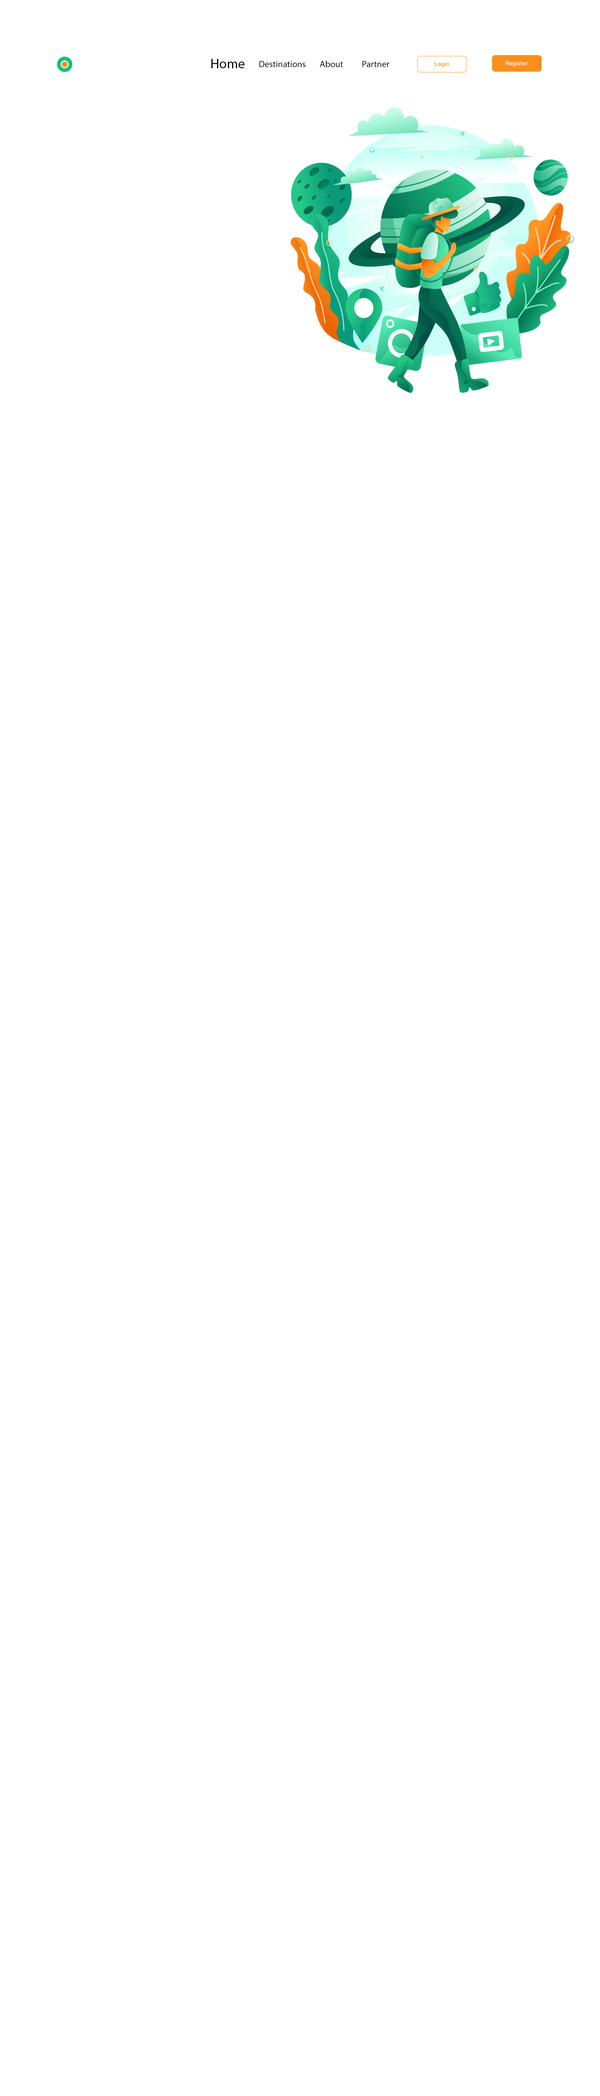
<style>
.page{position:relative;width:600px;height:2096px;background:#ffffff}
.page>*{position:absolute;margin:0}
.t1{font:13.5px "MyriadPro-Regular";color:#000000}
.t2{font:9px "MyriadPro-Regular";color:#000000}
</style>
<div class="page">
<p class="t1" style="left:211px;top:59px;width:33px;height:9px">Home</p>
<p class="t2" style="left:259px;top:61px;width:47px;height:6px">Destinations</p>
<p class="t2" style="left:320px;top:60px;width:23px;height:7px">About</p>
<p class="t2" style="left:362px;top:61px;width:27px;height:6px">Partner</p>
</div>
